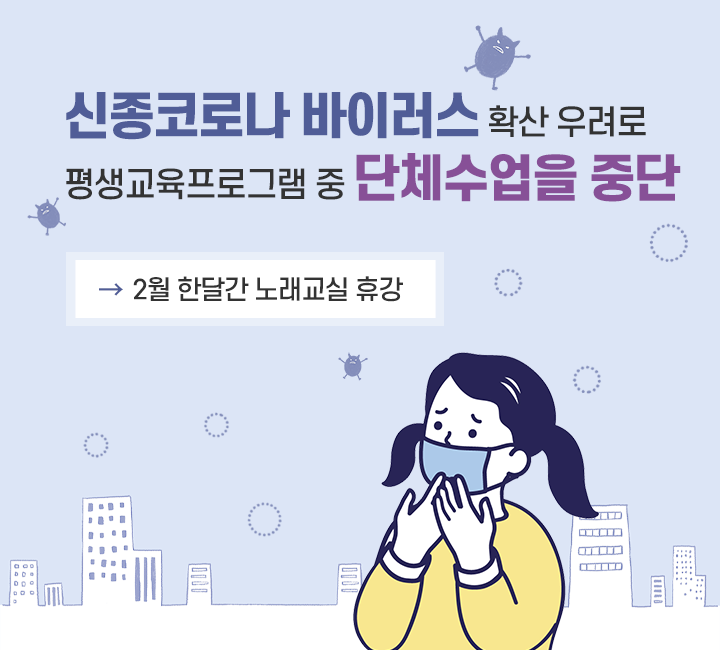
<style>
.page{position:relative;width:720px;height:650px;background:#dce5f6}
.page>*{position:absolute;margin:0}
.t1{font:33.4px/62.1px "S-CoreDream-5Medium";letter-spacing:-0.05em;color:#333333}
.t2{font:49.2px/62.1px "S-CoreDream-8Heavy";letter-spacing:-0.05em;color:#505d97}
.t3{font:49.2px/62.1px "S-CoreDream-8Heavy";letter-spacing:-0.05em;color:#875097}
.t4{font:26px "S-CoreDream-5Medium";letter-spacing:-0.05em;color:#333333}
.t5{font:26px "NotoSansKR-Medium";letter-spacing:-0.05em;color:#505d97}
</style>
<div class="page">
<p class="t1" style="left:66px;top:92px;width:615px;height:110px"><span class="t2">신종코로나 바이러스</span> 확산 우려로 <br>평생교육프로그램 중 <span class="t3">단체수업을 중단</span></p>
<p class="t4" style="left:133px;top:276px;width:270px;height:26px">2월 한달간 노래교실 휴강</p>
<p class="t5" style="left:99px;top:283px;width:24px;height:13px">→</p>
</div>
